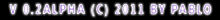
<style>
.page{position:relative;width:220px;height:20px;background:#000000}
.page>*{position:absolute;margin:0}
.t1{font:14px "SegoeCondensed-Bold";letter-spacing:0.1em}
</style>
<div class="page">
<p class="t1" style="left:9px;top:4px;width:202px;height:13px">V 0.2ALPHA (C) 2011 BY PABLO</p>
</div>
